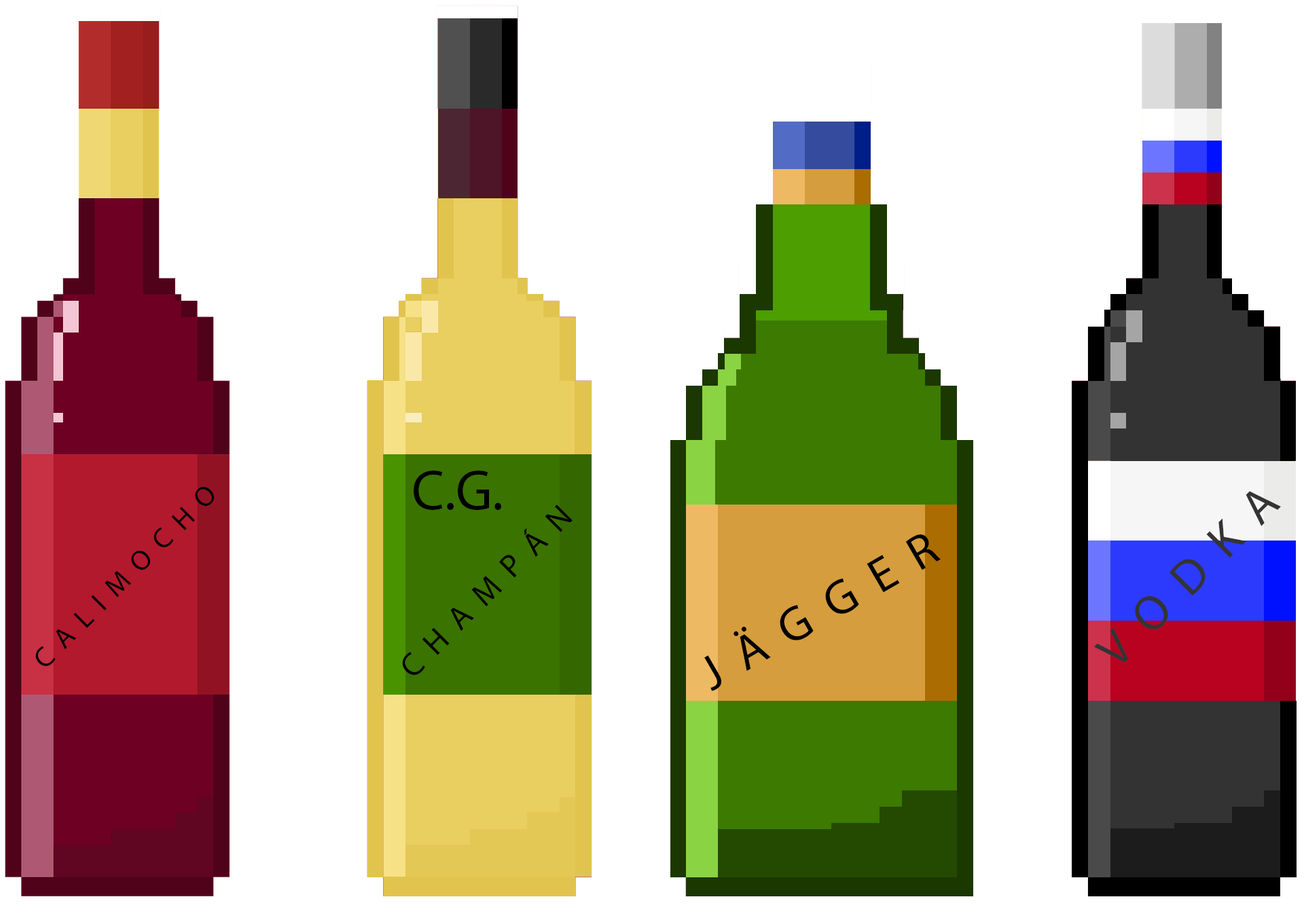
<style>
.page{position:relative;width:1304px;height:914px;background:#ffffff}
.page>*{position:absolute;margin:0}
.t1{font:56.2px "MyriadPro-Regular";color:#000000}
.t2{font:28.2px "MyriadPro-Regular";color:#000000}
.t3{font:32.6px "MyriadPro-Regular";color:#000000}
.t4{font:48.9px "MyriadPro-Regular";color:#000000}
</style>
<div class="page">
<p class="t1" style="left:414px;top:471px;width:87px;height:39px">C.G.</p>
<p class="t2" style="left:35px;top:487px;width:180px;height:179px;rotate:-45deg">C  A  L  I  M  O  C  H  O</p>
<p class="t3" style="left:402px;top:505px;width:171px;height:170px;rotate:-45deg">C  H  A  M  P  Á  N</p>
<p class="t4" style="left:704px;top:535px;width:237px;height:156px;rotate:-30deg">J  Ä  G  G  E  R</p>
</div>
